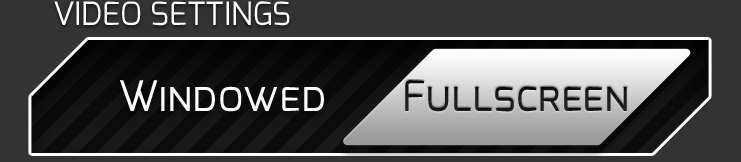
<style>
.page{position:relative;width:741px;height:162px;background:#333333}
.page>*{position:absolute;margin:0}
.t1{font:32px "Exo-Regular";color:#ffffff;text-transform:uppercase}
.t2{font:42px "Exo-Regular";color:#ffffff;font-variant:small-caps}
.t3{font:42px "Exo-Regular";color:#171717;font-variant:small-caps}
</style>
<div class="page">
<p class="t1" style="left:54px;top:1px;width:236px;height:25px">Video Settings</p>
<p class="t2" style="left:120px;top:80px;width:204px;height:32px">Windowed</p>
<p class="t3" style="left:405px;top:80px;width:222px;height:32px">Fullscreen</p>
</div>
